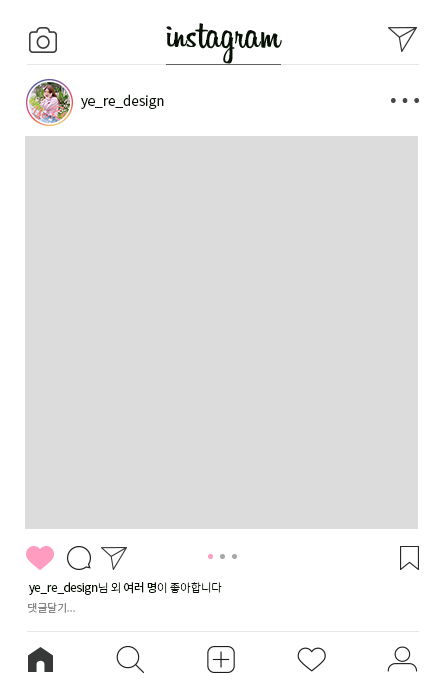
<style>
.page{position:relative;width:443px;height:691px;background:#dcdcdc}
.page>*{position:absolute;margin:0}
.t1{font:13.9px "NotoSansCJKkr-DemiLight";letter-spacing:-0.01em;color:#071005}
.t2{font:11.7px "NotoSansCJKkr-Regular";letter-spacing:-0.025em;color:#071005}
.t3{font:11.7px "NotoSansCJKkr-Light";letter-spacing:-0.025em;color:#071005}
.t4{font:10.8px "NotoSansCJKkr-DemiLight";letter-spacing:-0.01em;color:#888888}
</style>
<div class="page">
<p class="t1" style="left:81px;top:94px;width:83px;height:15px">ye_re_design</p>
<p class="t2" style="left:29px;top:582px;width:193px;height:13px">ye_re_design<span class="t3">님 외 </span>여러 명<span class="t3">이 좋아합니다</span></p>
<p class="t4" style="left:28px;top:602px;width:47px;height:11px">댓글달기...</p>
</div>
